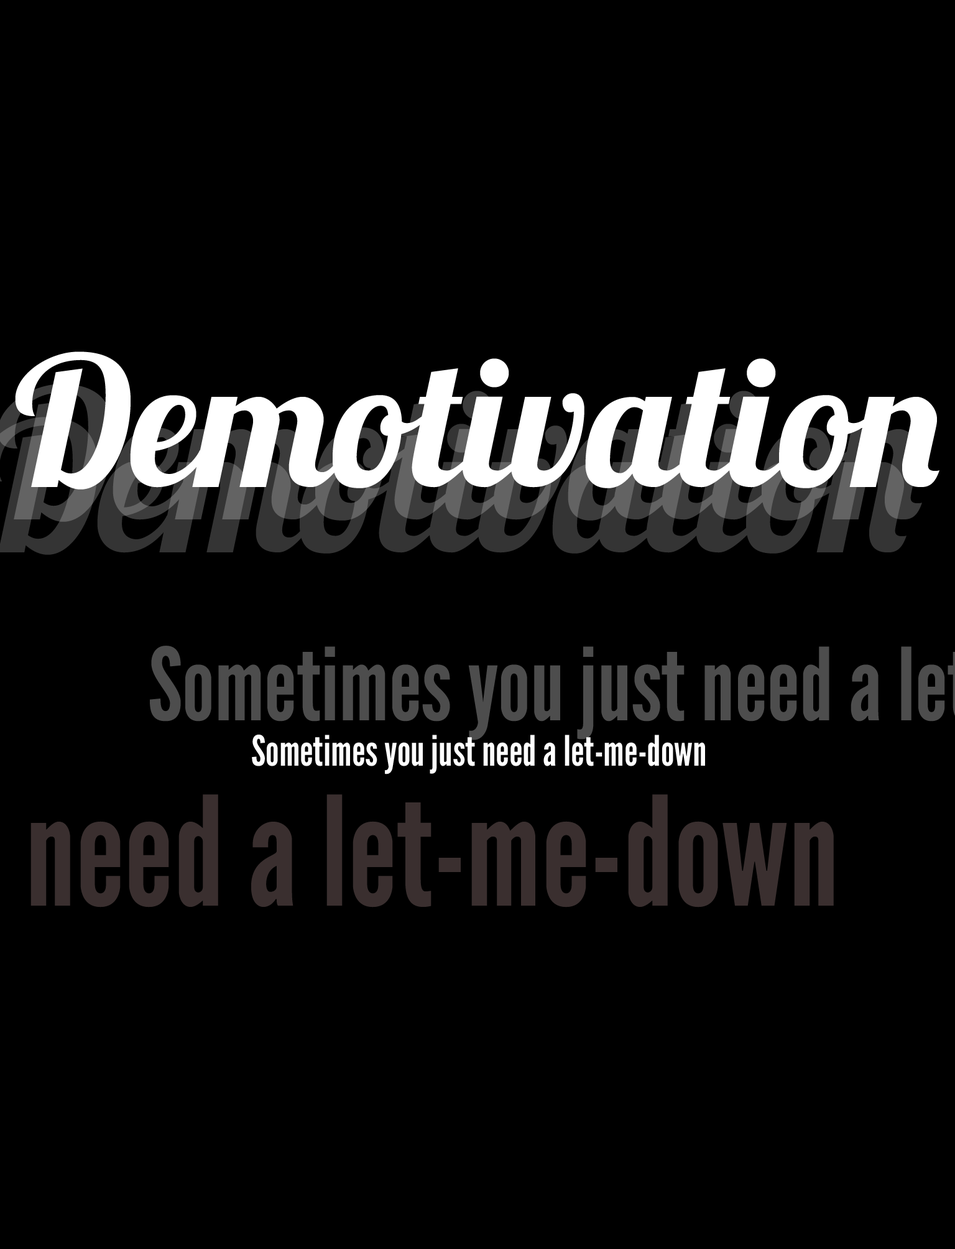
<style>
.page{position:relative;width:955px;height:1249px;background:#000000}
.page>*{position:absolute;margin:0}
.t1{font:180.3px "Lobster1.1";color:#ffffff}
.t2{font:41.8px "LeagueGothic";color:#ffffff}
</style>
<div class="page">
<p class="t1" style="left:15px;top:351px;width:925px;height:138px">Demotivation</p>
<p class="t2" style="left:252px;top:734px;width:453px;height:40px">Sometimes you just need a let-me-down</p>
</div>
